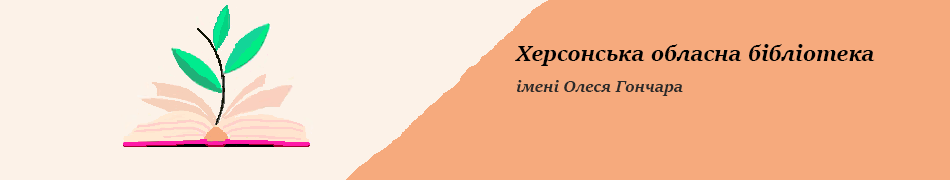
<style>
.page{position:relative;width:950px;height:180px;background:#f6aa7d}
.page>*{position:absolute;margin:0}
.t1{font:24px "SitkaSubheading-BoldItalic";color:#000000}
.t2{font:18px "SitkaHeading-BoldItalic";color:#2b2a2a}
</style>
<div class="page">
<p class="t1" style="left:515px;top:44px;width:360px;height:22px">Херсонська обласна бібліотека</p>
<p class="t2" style="left:516px;top:80px;width:167px;height:16px">імені Олеся Гончара</p>
</div>
